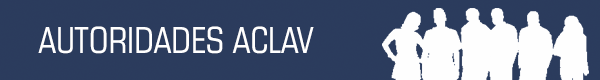
<style>
.page{position:relative;width:600px;height:80px;background:#2b3c5d}
.page>*{position:absolute;margin:0}
.t1{font:36px "Square721BT-RomanCondensed";color:#ffffff;text-transform:uppercase}
</style>
<div class="page">
<p class="t1" style="left:38px;top:26px;width:276px;height:28px">Autoridades ACLAV</p>
</div>
